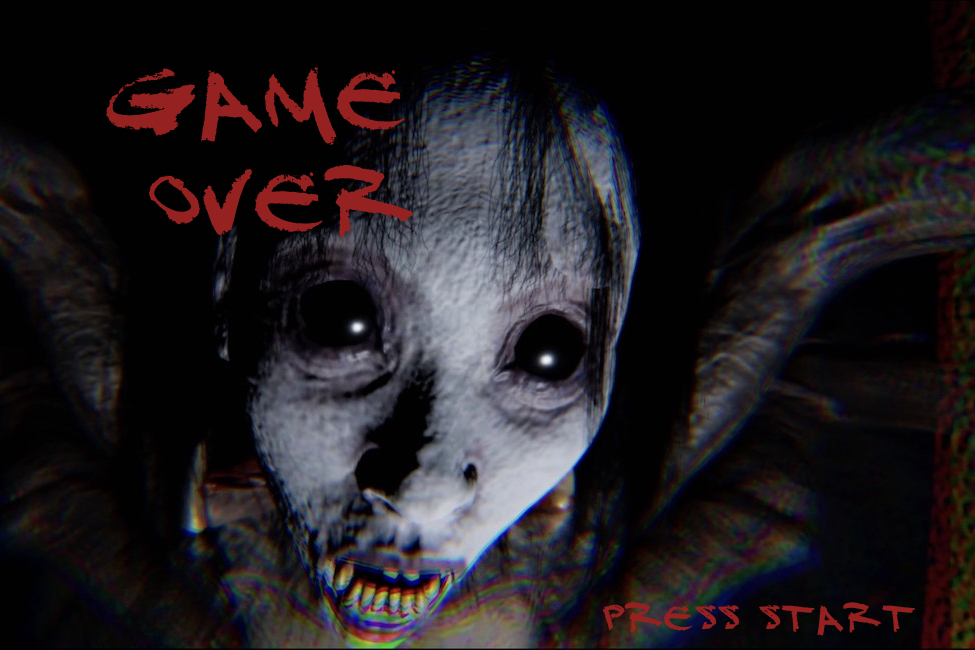
<style>
.page{position:relative;width:975px;height:650px;background:#010101}
.page>*{position:absolute;margin:0}
.t1{font:85px "DJ-Gross";color:#962121}
.t2{font:36px "DJ-Gross";color:#962121}
</style>
<div class="page">
<p class="t1" style="left:106px;top:67px;width:308px;height:171px">game<br> over</p>
<p class="t2" style="left:602px;top:602px;width:314px;height:34px">PREss start</p>
</div>
